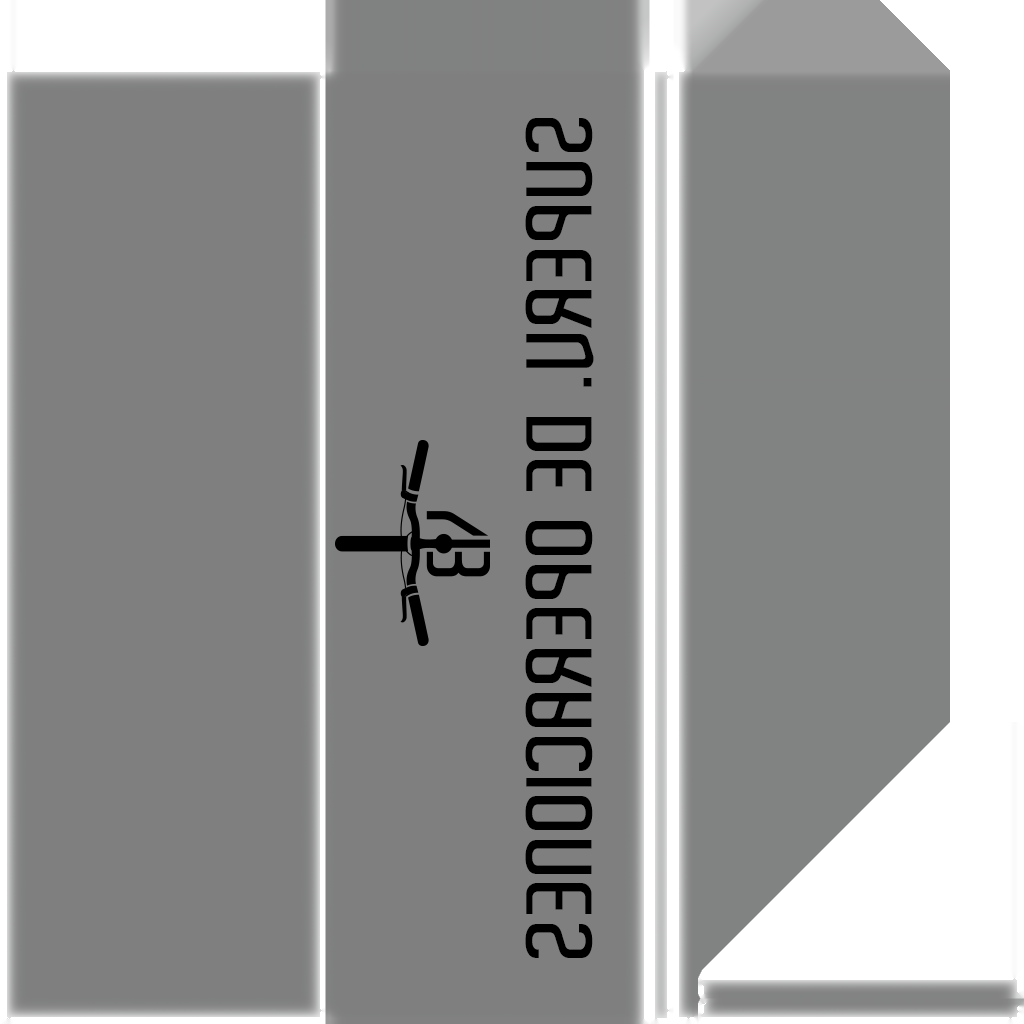
<style>
.page{position:relative;width:1024px;height:1024px;background:#7f7f7f}
.page>*{position:absolute;margin:0}
.t1{font:90px "Aldo-SemiBold";color:#000000;scale:1.11 1}
</style>
<div class="page">
<p class="t1" style="left:525px;top:118px;width:69px;height:840px;rotate:90deg">SUPERV. DE OPERACIONES</p>
</div>
